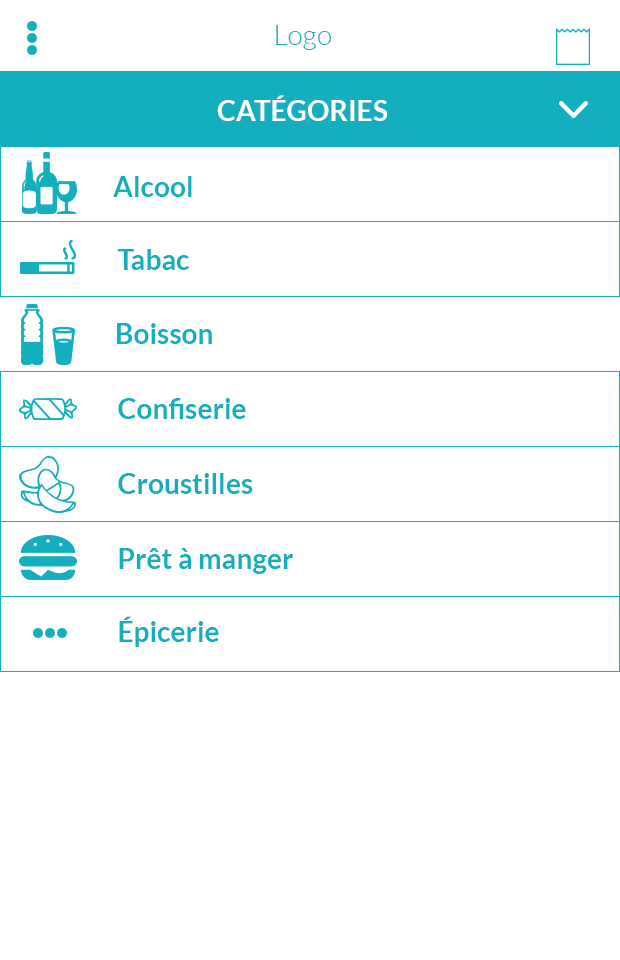
<style>
.page{position:relative;width:620px;height:960px;background:#ffffff}
.page>*{position:absolute;margin:0}
.t1{font:28.1px "Lato-Light";color:#14afbe}
.t2{font:28.1px "Lato-Bold";color:#ffffff}
.t3{font:28.1px "Lato-Bold";color:#14afbe}
</style>
<div class="page">
<p class="t1" style="left:276px;top:25px;width:55px;height:25px">Logo</p>
<p class="t2" style="left:217px;top:95px;width:171px;height:26px">CATÉGORIES</p>
<p class="t3" style="left:113px;top:176px;width:79px;height:21px">Alcool</p>
<p class="t3" style="left:117px;top:249px;width:72px;height:21px">Tabac</p>
<p class="t3" style="left:117px;top:323px;width:95px;height:21px">Boisson</p>
<p class="t3" style="left:118px;top:398px;width:128px;height:21px">Confiserie</p>
<p class="t3" style="left:118px;top:473px;width:135px;height:21px">Croustilles</p>
<p class="t3" style="left:119px;top:548px;width:174px;height:26px">Prêt à manger</p>
<p class="t3" style="left:119px;top:616px;width:100px;height:31px">Épicerie</p>
</div>
